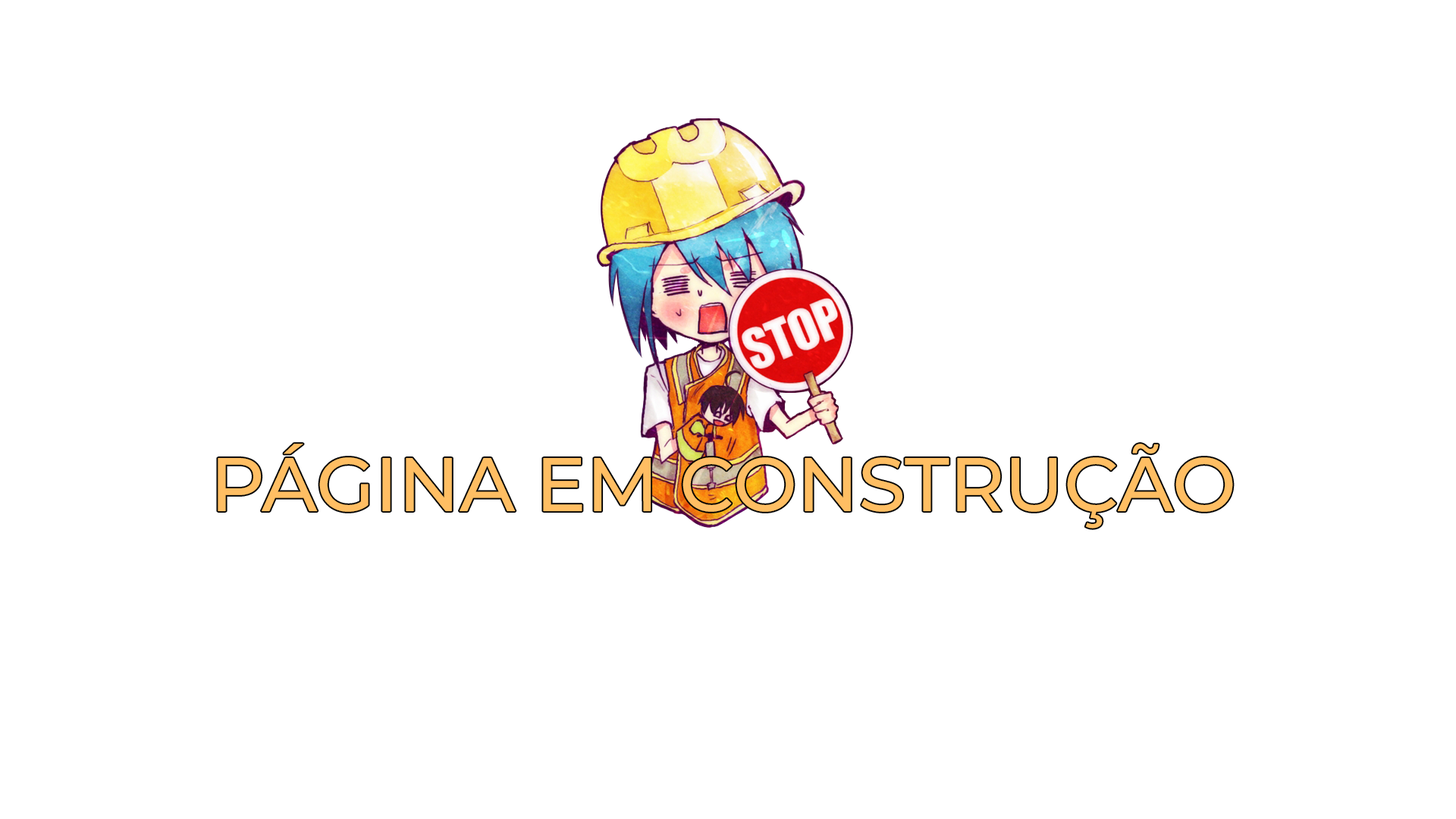
<style>
.page{position:relative;width:1456px;height:819px;background:#ffffff}
.page>*{position:absolute;margin:0}
.t1{font:75.8px "MontserratRoman-Medium";color:#ffbe63}
</style>
<div class="page">
<p class="t1" style="left:218px;top:444px;width:1015px;height:85px">PÁGINA EM CONSTRUÇÃO</p>
</div>
